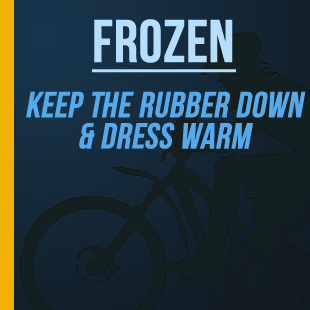
<style>
.page{position:relative;width:310px;height:310px}
.page>*{position:absolute;margin:0}
.t1{font:36px "BebasNeue";color:#55aaec;font-weight:bold;font-style:italic}
.t2{font:60px "BebasNeue";color:#b6dffe;font-weight:bold;text-decoration:underline}
</style>
<div class="page">
<p class="t1" style="left:26px;top:19px;width:280px;height:130px;text-align:center"><span class="t2">Frozen<br></span>Keep the rubber down<br>&amp; Dress Warm</p>
</div>
